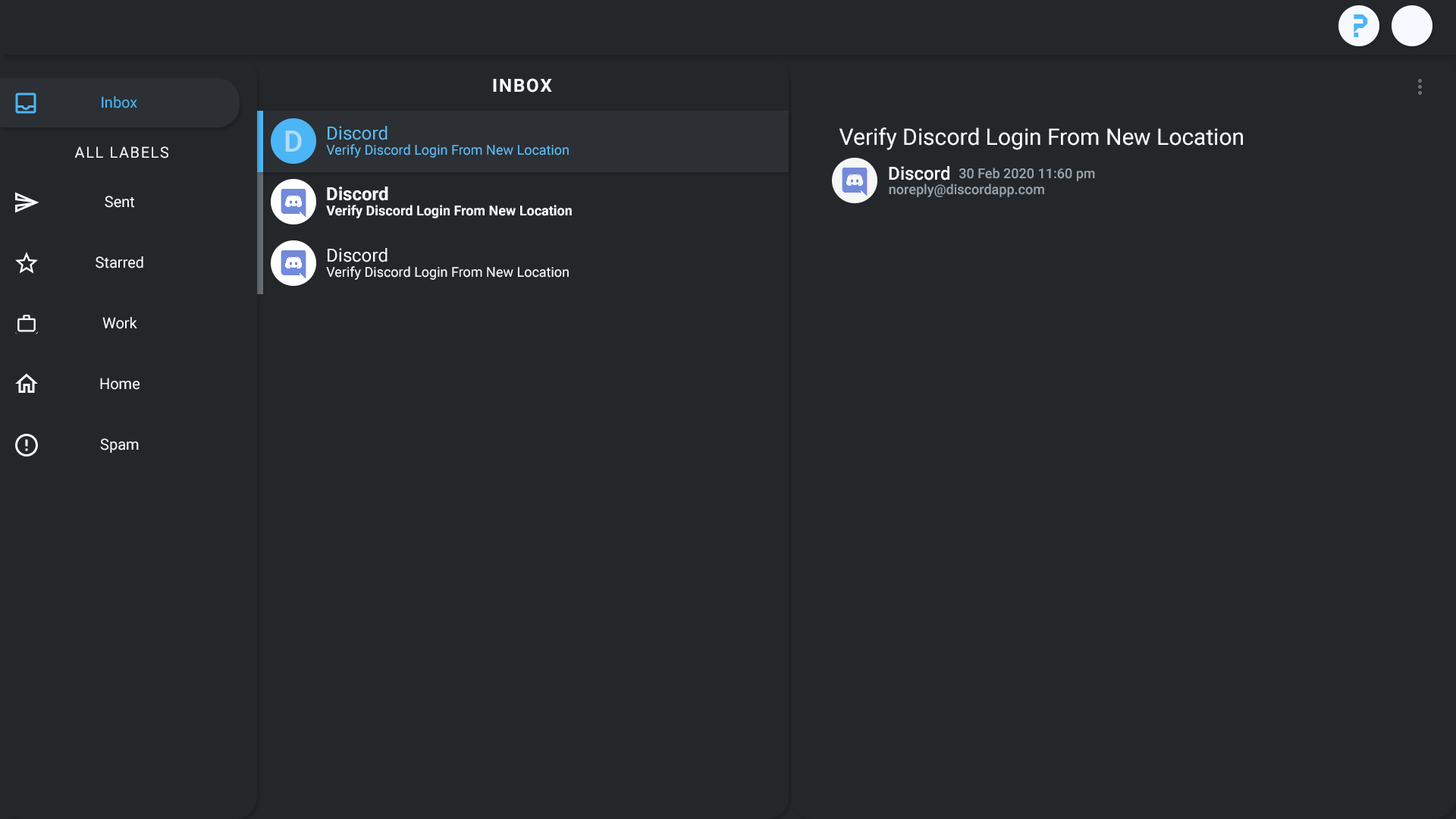
<style>
.page{position:relative;width:1456px;height:819px;background:#23272a}
.page>*{position:absolute;margin:0}
.t1{font:36.4px "Fruitymicrofont";color:#4cb5f5}
.t2{font:18.2px "Roboto-Bold";letter-spacing:0.08em;color:#f6f9ff}
.t3{font:15.2px "Roboto-Regular";color:#4cb5f5}
.t4{font:18.2px "Roboto-Regular";color:#5cbbf5}
.t5{font:29.7px "Roboto-Medium";letter-spacing:0.024em;color:#b2dcf7}
.t6{font:22.7px "Roboto-Regular";color:#f6f9ff}
.t7{font:15.2px "Roboto-Regular";letter-spacing:0.08em;color:#f6f9ff}
.t8{font:13.6px "Roboto-Regular";color:#5cbbf5}
.t9{font:18.2px "Roboto-Medium";color:#f6f9ff}
.t10{font:13.6px "Roboto-Medium";color:#97a4ad}
.t11{font:15.2px "Roboto-Regular";color:#f6f9ff}
.t12{font:18.2px "Roboto-Bold";color:#f6f9ff}
.t13{font:13.6px "Roboto-Bold";color:#f6f9ff}
.t14{font:18.2px "Roboto-Regular";color:#f6f9ff}
.t15{font:13.6px "Roboto-Regular";color:#f6f9ff}
</style>
<div class="page">
<p class="t1" style="left:1354px;top:14px;width:14px;height:23px">?</p>
<p class="t2" style="left:493px;top:78px;width:59px;height:15px">INBOX</p>
<p class="t3" style="left:102px;top:96px;width:35px;height:12px">Inbox</p>
<p class="t4" style="left:328px;top:126px;width:60px;height:14px">Discord</p>
<p class="t5" style="left:285px;top:130px;width:17px;height:22px">D</p>
<p class="t6" style="left:839px;top:127px;width:404px;height:23px">Verify Discord Login From New Location</p>
<p class="t7" style="left:74px;top:146px;width:94px;height:12px">ALL LABELS</p>
<p class="t8" style="left:326px;top:144px;width:243px;height:14px">Verify Discord Login From New Location</p>
<p class="t9" style="left:889px;top:166px;width:60px;height:14px">Discord</p>
<p class="t10" style="left:959px;top:168px;width:136px;height:13px">30 Feb 2020 11:60 pm</p>
<p class="t10" style="left:889px;top:184px;width:155px;height:13px">noreply@discordapp.com</p>
<p class="t11" style="left:105px;top:196px;width:29px;height:12px">Sent</p>
<p class="t12" style="left:327px;top:187px;width:61px;height:14px">Discord</p>
<p class="t13" style="left:326px;top:205px;width:246px;height:13px">Verify Discord Login From New Location</p>
<p class="t11" style="left:96px;top:256px;width:47px;height:12px">Starred</p>
<p class="t14" style="left:328px;top:248px;width:60px;height:14px">Discord</p>
<p class="t15" style="left:326px;top:266px;width:243px;height:14px">Verify Discord Login From New Location</p>
<p class="t11" style="left:102px;top:317px;width:35px;height:12px">Work</p>
<p class="t11" style="left:100px;top:378px;width:40px;height:12px">Home</p>
<p class="t11" style="left:100px;top:438px;width:39px;height:15px">Spam</p>
</div>
